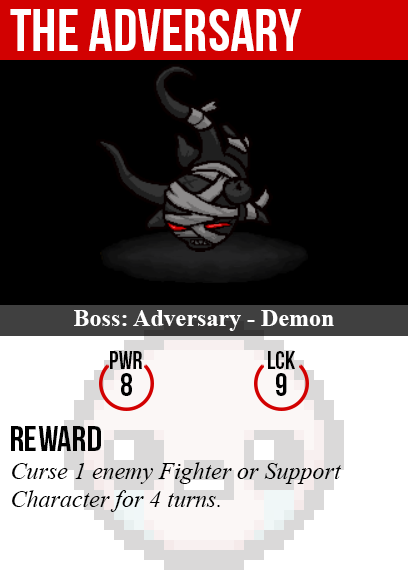
<style>
.page{position:relative;width:408px;height:585px;background:#000000}
.page>*{position:absolute;margin:0}
.t1{font:60px "BebasNeue";color:#ffffff}
.t2{font:24px "TimesNewRomanPS-BoldMT";color:#ffffff}
.t3{font:25px "BebasNeue";color:#000000}
.t4{font:32px "BebasNeue";color:#000000}
.t5{font:36px "BebasNeue";color:#000000}
.t6{font:24px "TimesNewRomanPS-ItalicMT";color:#000000}
</style>
<div class="page">
<p class="t1" style="left:10px;top:9px;width:292px;height:42px">the adversary</p>
<p class="t2" style="left:74px;top:310px;width:260px;height:21px">Boss: Adversary - Demon</p>
<p class="t3" style="left:110px;top:351px;width:32px;height:18px">PWR</p>
<p class="t3" style="left:268px;top:351px;width:27px;height:18px">lck</p>
<p class="t4" style="left:121px;top:373px;width:11px;height:23px">8</p>
<p class="t4" style="left:276px;top:373px;width:11px;height:23px">9</p>
<p class="t5" style="left:11px;top:426px;width:90px;height:25px">reward</p>
<p class="t6" style="left:12px;top:462px;width:329px;height:50px">Curse 1 enemy Fighter or Support<br>Character for 4 turns.</p>
</div>
